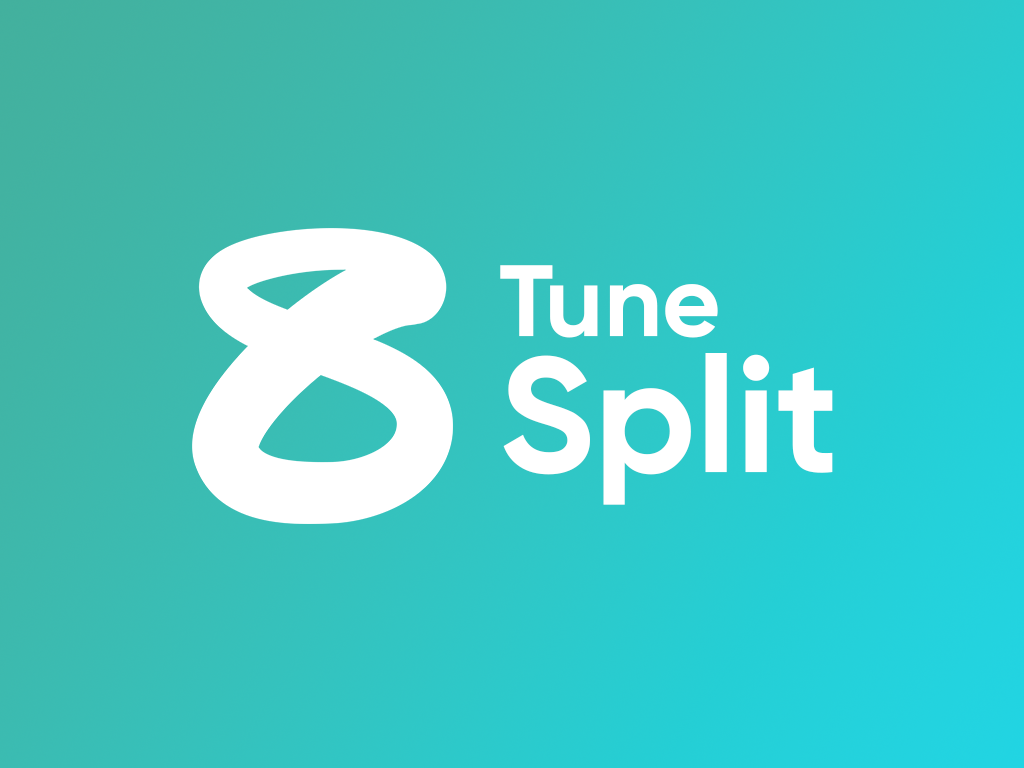
<style>
.page{position:relative;width:1024px;height:768px}
.page>*{position:absolute;margin:0}
.t1{font:162.8px/136.2px "Gilroy-Bold";color:#ffffff}
.t2{font:100.6px/136.2px "Gilroy-Bold";color:#ffffff}
</style>
<div class="page">
<p class="t1" style="left:500px;top:265px;width:333px;height:240px"><span class="t2">Tune<br></span>Split</p>
</div>
